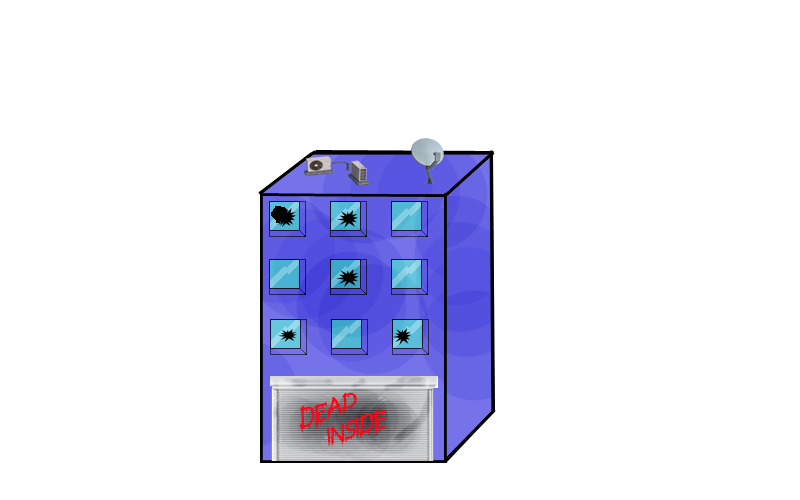
<style>
.page{position:relative;width:800px;height:500px;background:#ffffff}
.page>*{position:absolute;margin:0}
.t1{font:30px "Anti-Everything";color:#f8091a}
</style>
<div class="page">
<p class="t1" style="left:299px;top:393px;width:58px;height:40px">dead</p>
<p class="t1" style="left:327px;top:410px;width:60px;height:36px">inside</p>
</div>
